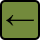
<style>
.page{position:relative;width:40px;height:40px;background:#738a3c}
.page>*{position:absolute;margin:0}
.t1{font:30px "TimesNewRomanPS-BoldMT";color:#000000}
</style>
<div class="page">
<p class="t1" style="left:6px;top:15px;width:28px;height:11px">←</p>
</div>
